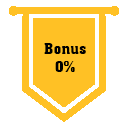
<style>
.page{position:relative;width:128px;height:128px;background:#ffffff}
.page>*{position:absolute;margin:0}
.t1{font:15px "Aachen-Bold";color:#000000}
</style>
<div class="page">
<p class="t1" style="left:44px;top:43px;width:42px;height:29px;text-align:center">Bonus<br>0%</p>
</div>
